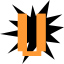
<style>
.page{position:relative;width:64px;height:64px;background:#ffffff}
.page>*{position:absolute;margin:0}
.t1{font:60px "Fixedsys";color:#ff9933}
</style>
<div class="page">
<p class="t1" style="left:17px;top:13px;width:29px;height:43px">U</p>
</div>
